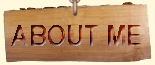
<style>
.page{position:relative;width:155px;height:65px}
.page>*{position:absolute;margin:0}
.t1{font:30px "ArialNarrow-Bold"}
.t2{font:36px "ArialNarrow-Bold"}
</style>
<div class="page">
<p class="t1" style="left:11px;top:25px;width:130px;height:21px">ABOUT ME<span class="t2"> ME</span></p>
</div>
